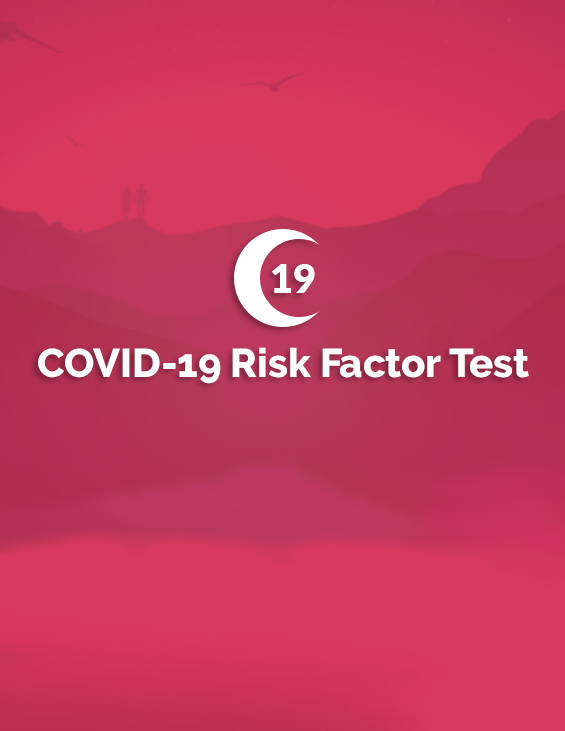
<style>
.page{position:relative;width:565px;height:731px}
.page>*{position:absolute;margin:0}
.t1{font:40px "Lato-Black";color:#fefefe}
.t2{font:40px "Raleway-ExtraBold";color:#fefefe}
</style>
<div class="page">
<p class="t1" style="left:272px;top:264px;width:43px;height:29px">19</p>
<p class="t2" style="left:38px;top:347px;width:491px;height:37px">COVID-19 Risk Factor Test</p>
</div>
